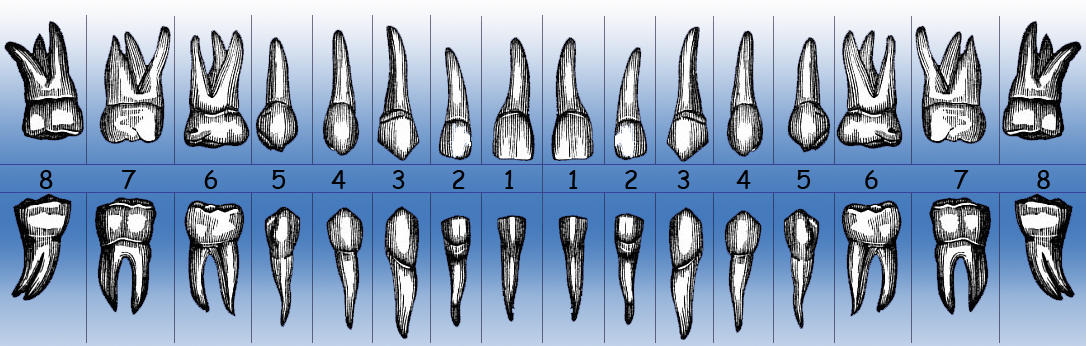
<style>
.page{position:relative;width:1086px;height:346px}
.page>*{position:absolute;margin:0}
.t1{font:25px "ComicSansMS";color:#000000}
</style>
<div class="page">
<p class="t1" style="left:40px;top:170px;width:474px;height:19px">1     2      3      4      5       6         7         8</p>
<p class="t1" style="left:569px;top:170px;width:481px;height:19px">8         7          6       5      4      3     2      1</p>
</div>
